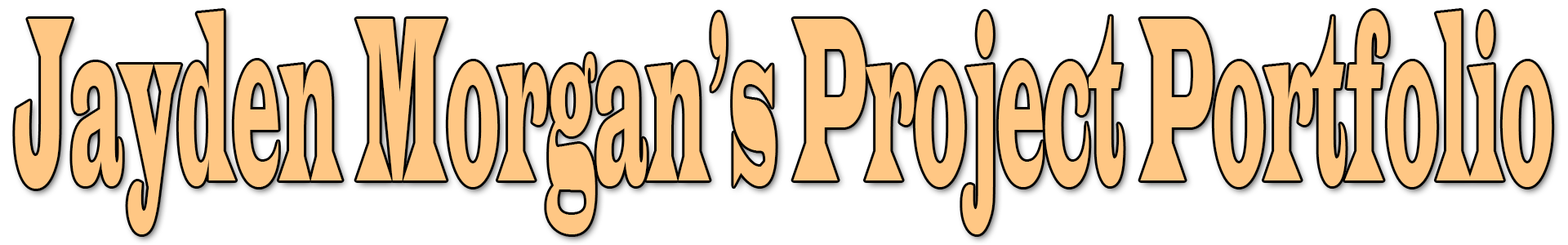
<style>
.page{position:relative;width:1568px;height:245px;background:#ffffff}
.page>*{position:absolute;margin:0}
.t1{font:242.9px "LatinWide";color:#ffc784;scale:0.22 1}
</style>
<div class="page">
<p class="t1" style="left:15px;top:11px;width:1537px;height:223px">Jayden Morgan’s Project Portfolio</p>
</div>
